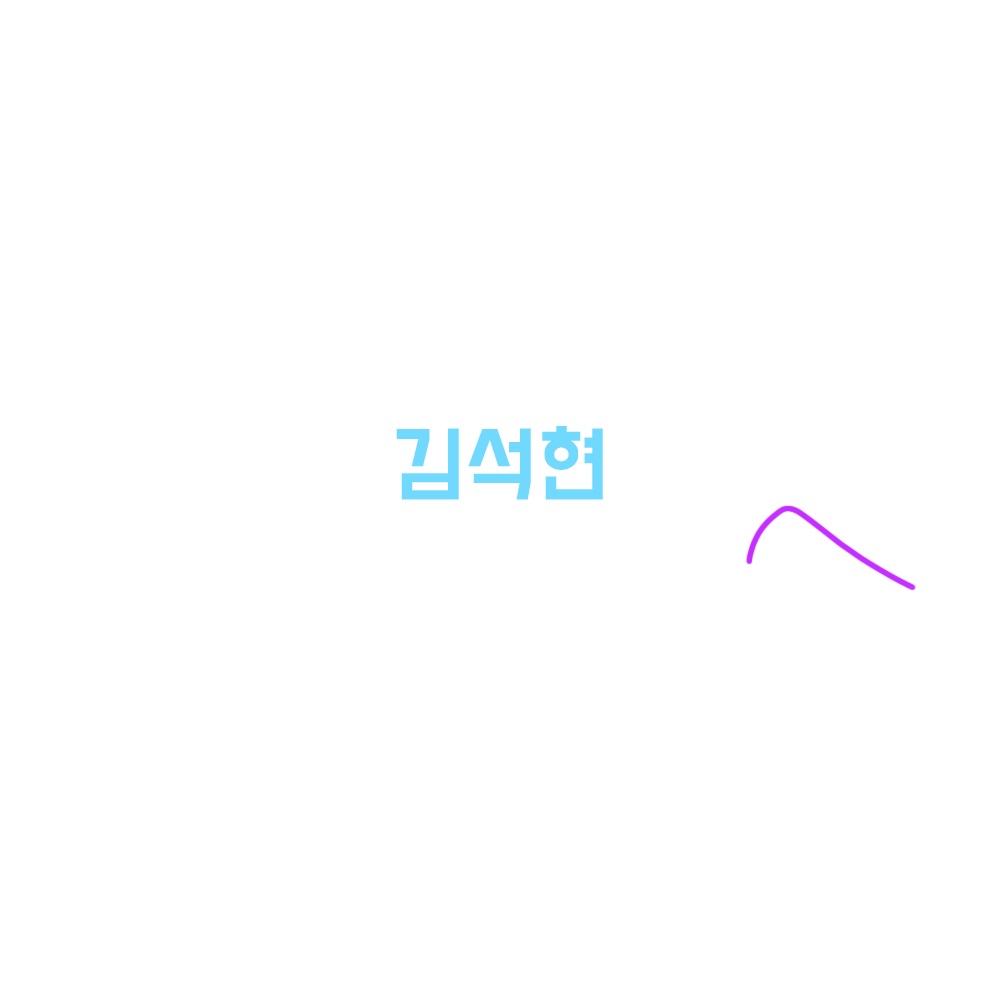
<style>
.page{position:relative;width:1000px;height:1000px;background:#ffffff}
.page>*{position:absolute;margin:0}
.t1{font:75px "BMDoHyeon-OTF";color:#72d9fe}
</style>
<div class="page">
<p class="t1" style="left:396px;top:426px;width:207px;height:74px">김석현</p>
</div>
